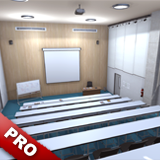
<style>
.page{position:relative;width:160px;height:160px}
.page>*{position:absolute;margin:0}
.t1{font:16px "Arial-Black";color:#ffffff}
</style>
<div class="page">
<p class="t1" style="left:4px;top:127px;width:33px;height:29px;rotate:39deg">PRO</p>
</div>
